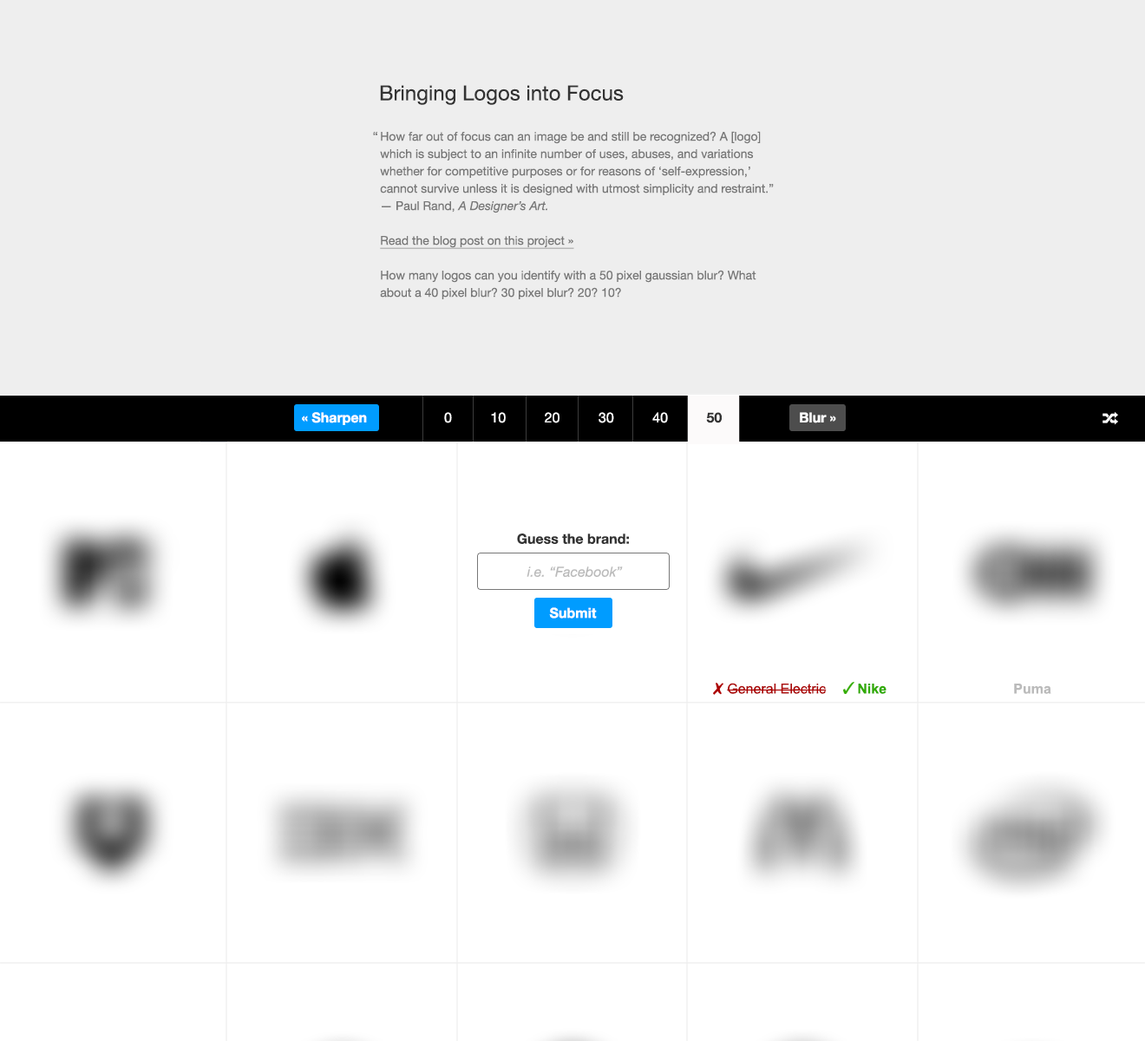
<style>
.page{position:relative;width:1145px;height:1041px;background:#ffffff}
.page>*{position:absolute;margin:0}
.t1{font:20.8px "HelveticaNeue";color:#333333}
.t2{font:12.1px "HelveticaNeue";color:#777777}
.t3{font:12.1px/17.4px "HelveticaNeue";color:#777777}
.t4{font:12.1px/17.4px "HelveticaNeue-Italic";color:#777777}
.t5{font:12.1px/17.4px "HelveticaNeue";color:#777777;text-decoration:underline}
.t6{font:13.9px "HelveticaNeue";color:#ffffff}
.t7{font:13.9px "HelveticaNeue-Bold";color:#ffffff}
.t8{font:13.9px "HelveticaNeue-Bold";color:#333333}
.t9{font:13.9px "HelveticaNeue-Italic";color:#bbbbbb}
.t10{font:13.9px "ArialMT";color:#ac0202}
.t11{font:13.9px "Arial-BoldMT";color:#31ab01}
.t12{font:13.9px "Arial-BoldMT";color:#bbbbbb}
</style>
<div class="page">
<p class="t1" style="left:380px;top:85px;width:244px;height:20px">Bringing Logos into Focus</p>
<p class="t2" style="left:373px;top:132px;width:4px;height:3px">“</p>
<p class="t3" style="left:380px;top:131px;width:394px;height:168px">How far out of focus can an image be and still be recognized? A [logo] which is subject to an infinite number of uses, abuses, and variations whether for competitive purposes or for reasons of ‘self-expression,’ cannot survive unless it is designed with utmost simplicity and restraint.” <br>— Paul Rand, <span class="t4">A Designer’s Art. <br><br></span><span class="t5">Read the blog post on this project »<br><br></span>How many logos can you identify with a 50 pixel gaussian blur? What about a 40 pixel blur? 30 pixel blur? 20? 10?</p>
<p class="t6" style="left:302px;top:412px;width:534px;height:13px"><span class="t7">« Sharpen                    </span>0          10          20          30          40          <span class="t8">50                    </span><span class="t7">Blur »</span></p>
<p class="t8" style="left:517px;top:534px;width:112px;height:11px">Guess the brand:</p>
<p class="t9" style="left:527px;top:567px;width:96px;height:10px">i.e. “Facebook”</p>
<p class="t7" style="left:549px;top:607px;width:48px;height:12px">Submit</p>
<p class="t10" style="left:727px;top:683px;width:100px;height:11px">General Electric</p>
<p class="t11" style="left:858px;top:684px;width:29px;height:10px">Nike</p>
<p class="t12" style="left:1014px;top:684px;width:38px;height:10px">Puma</p>
</div>
